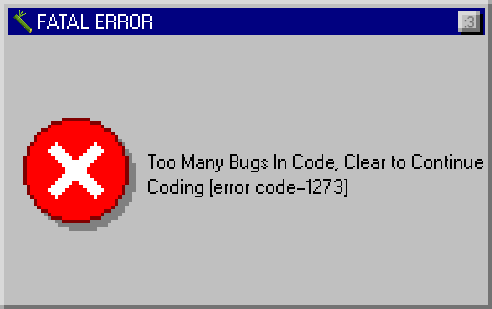
<style>
.page{position:relative;width:492px;height:309px;background:#c0c0c0}
.page>*{position:absolute;margin:0}
.t1{font:20.8px "W95FARegular";color:#ffffff}
.t2{font:15.1px "W95FARegular";color:#6d6d6d}
.t3{font:20.8px "W95FARegular";color:#000000}
</style>
<div class="page">
<p class="t1" style="left:38px;top:14px;width:114px;height:15px">FATAL ERROR</p>
<p class="t2" style="left:464px;top:16px;width:10px;height:12px">:3</p>
<p class="t3" style="left:148px;top:154px;width:335px;height:43px">Too Many Bugs In Code, Clear to Continue Coding [error code-1273]</p>
</div>
